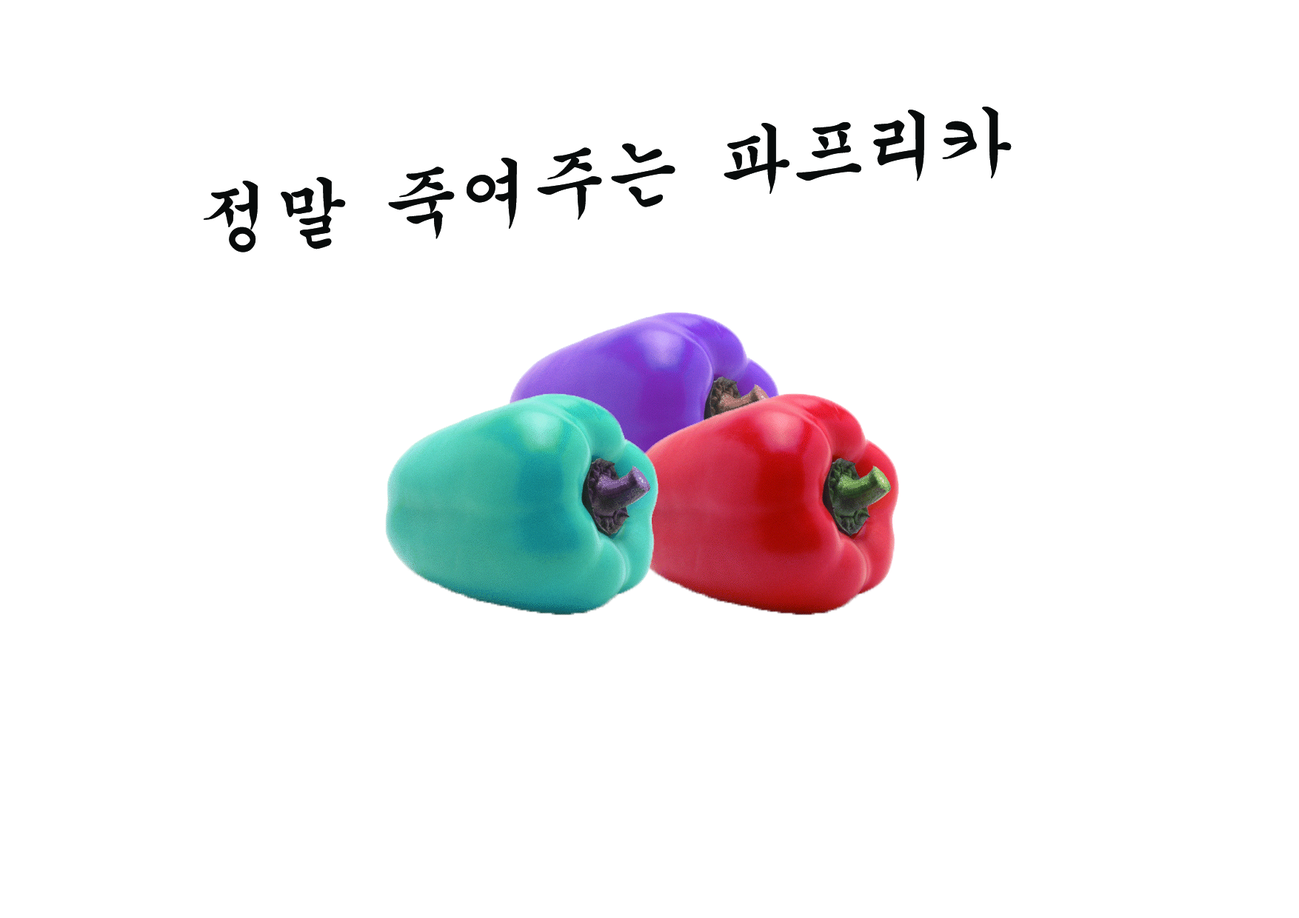
<style>
.page{position:relative;width:1299px;height:918px;background:#ffffff}
.page>*{position:absolute;margin:0}
.t1{font:74px "GungsuhChe";color:#080b0b}
</style>
<div class="page">
<p class="t1" style="left:203px;top:107px;width:808px;height:145px;text-align:center">정말 죽여주는 파프리카</p>
</div>
